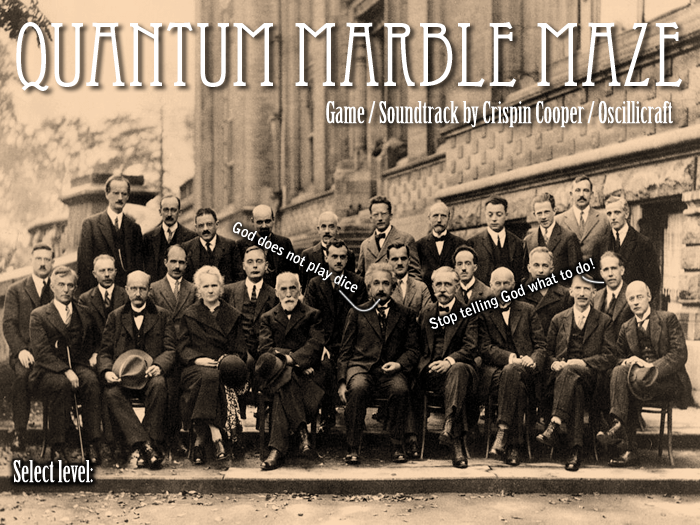
<style>
.page{position:relative;width:700px;height:525px}
.page>*{position:absolute;margin:0}
.t1{font:88.9px "EccentricStd";color:#ffffff}
.t2{font:29.6px "BirchStd";color:#ffffff}
.t3{font:14.8px "BellGothicStd-Bold";color:#ffffff}
</style>
<div class="page">
<p class="t1" style="left:16px;top:21px;width:667px;height:70px">Quantum Marble Maze</p>
<p class="t2" style="left:326px;top:101px;width:347px;height:27px">Game / Soundtrack by Crispin Cooper / Oscillicraft</p>
<p class="t3" style="left:233px;top:222px;width:125px;height:71px;rotate:27deg">God does not play dice</p>
<p class="t3" style="left:429px;top:258px;width:166px;height:71px;rotate:-21deg">Stop telling God what to do!</p>
<p class="t2" style="left:13px;top:460px;width:80px;height:23px">Select level:</p>
</div>
